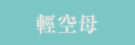
<style>
.page{position:relative;width:135px;height:45px;background:#7dc6c6}
.page>*{position:absolute;margin:0}
.t1{font:21px "RyuminPro-Medium";color:#f4e6df}
</style>
<div class="page">
<p class="t1" style="left:36px;top:14px;width:62px;height:20px">輕空母</p>
</div>
